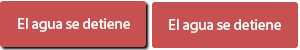
<style>
.page{position:relative;width:300px;height:50px;background:#c65150}
.page>*{position:absolute;margin:0}
.t1{font:15px "MyriadHebrew-Regular";color:#ffffff}
</style>
<div class="page">
<p class="t1" style="left:18px;top:18px;width:112px;height:14px">El agua se detiene</p>
<p class="t1" style="left:169px;top:19px;width:112px;height:14px">El agua se detiene</p>
</div>
